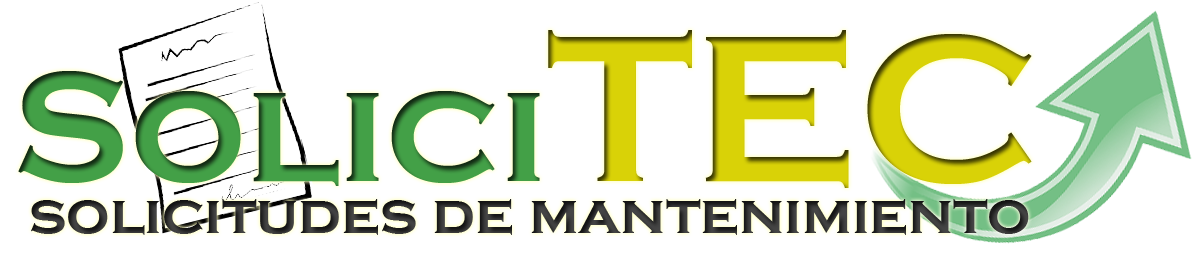
<style>
.page{position:relative;width:1200px;height:260px;background:#ffffff}
.page>*{position:absolute;margin:0}
.t1{font:161.1px "CopperplateGothic-Bold";color:#43a047}
.t2{font:214.7px "CopperplateGothic-Bold";color:#d9d207}
.t3{font:59.9px "CopperplateGothic-Bold";color:#303030}
</style>
<div class="page">
<p class="t1" style="left:18px;top:30px;width:1014px;height:158px">Solici<span class="t2">TEC</span></p>
<p class="t3" style="left:31px;top:199px;width:998px;height:36px">solicitudes de mantenimiento</p>
</div>
